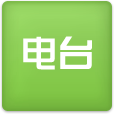
<style>
.page{position:relative;width:114px;height:114px}
.page>*{position:absolute;margin:0}
.t1{font:36px "ç»å¸ç»¼èºä½ç®-regular";letter-spacing:0.025em;color:#ffffff}
</style>
<div class="page">
<p class="t1" style="left:23px;top:36px;width:69px;height:34px">电台</p>
</div>
